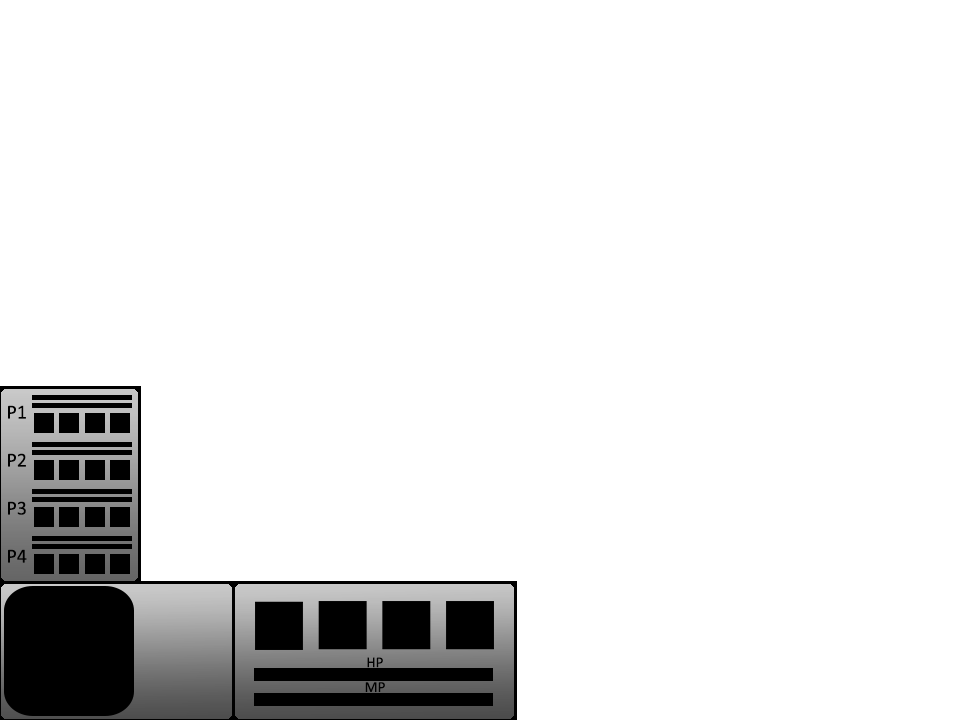
<style>
.page{position:relative;width:960px;height:720px;background:#ffffff}
.page>*{position:absolute;margin:0}
.t1{font:20px "Calibri";color:#000000}
.t2{font:15px "Calibri";color:#000000}
</style>
<div class="page">
<p class="t1" style="left:8px;top:405px;width:19px;height:158px">P1<br><br>P2<br><br>P3<br><br>P4</p>
<p class="t2" style="left:367px;top:657px;width:16px;height:11px">HP</p>
<p class="t2" style="left:365px;top:682px;width:20px;height:10px;text-align:center">MP<br>v</p>
</div>
